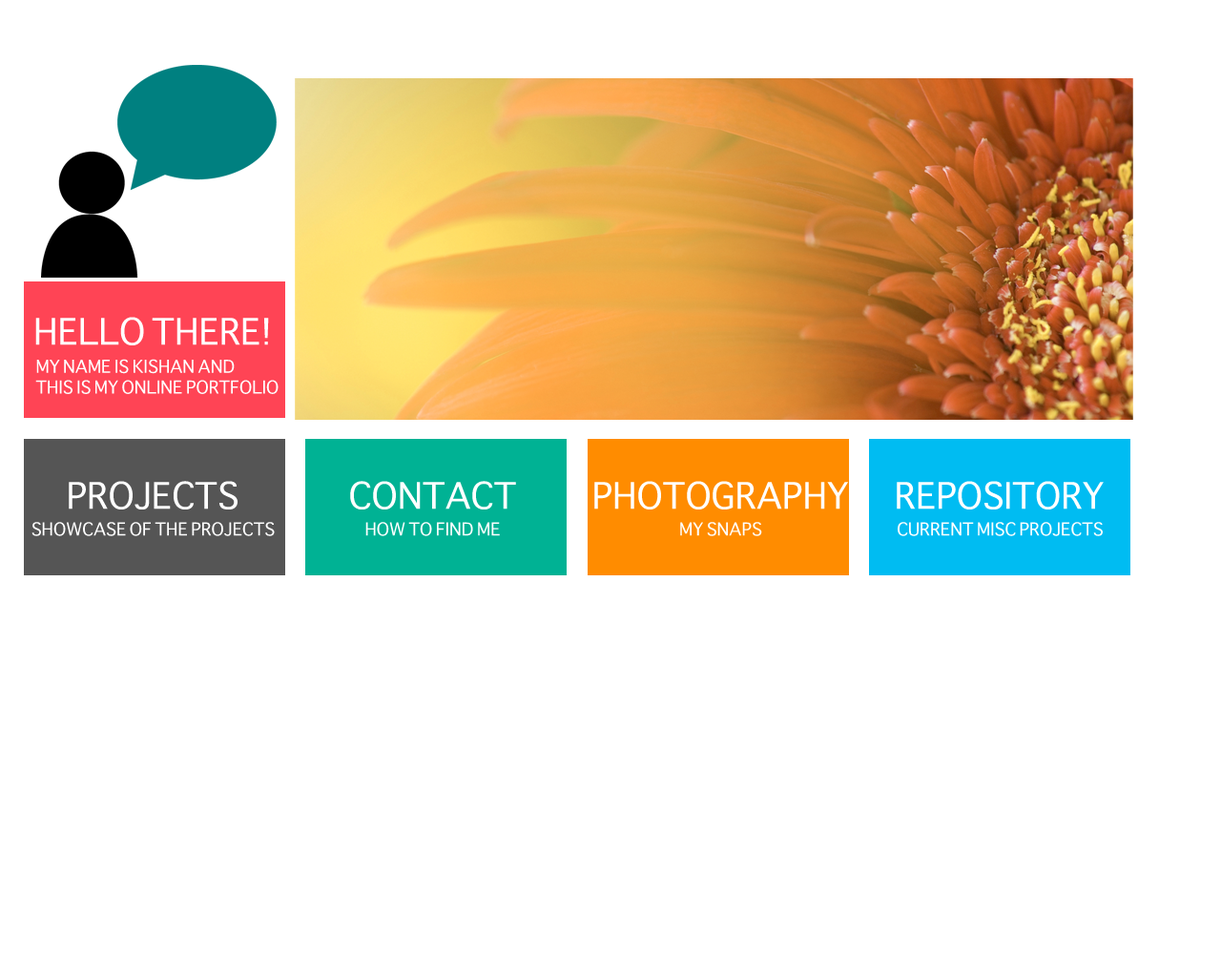
<style>
.page{position:relative;width:1221px;height:977px;background:#ffffff}
.page>*{position:absolute;margin:0}
.t1{font:35.3px "Sathu";color:#ffffff;text-transform:uppercase}
.t2{font:17.2px "Sathu";color:#ffffff;text-transform:uppercase}
</style>
<div class="page">
<p class="t1" style="left:35px;top:317px;width:234px;height:28px">Hello There!</p>
<p class="t2" style="left:35px;top:359px;width:244px;height:35px">My name is Kishan and<br>this is my online portfolio</p>
<p class="t1" style="left:69px;top:481px;width:168px;height:28px">Projects</p>
<p class="t1" style="left:350px;top:481px;width:166px;height:28px">Contact</p>
<p class="t1" style="left:594px;top:481px;width:254px;height:28px">Photography</p>
<p class="t1" style="left:897px;top:481px;width:207px;height:28px">repository</p>
<p class="t2" style="left:31px;top:522px;width:244px;height:14px">Showcase of the projects</p>
<p class="t2" style="left:365px;top:522px;width:135px;height:14px">How to find me</p>
<p class="t2" style="left:680px;top:522px;width:82px;height:14px">My snaps</p>
<p class="t2" style="left:898px;top:522px;width:205px;height:14px">current misc projects</p>
</div>
